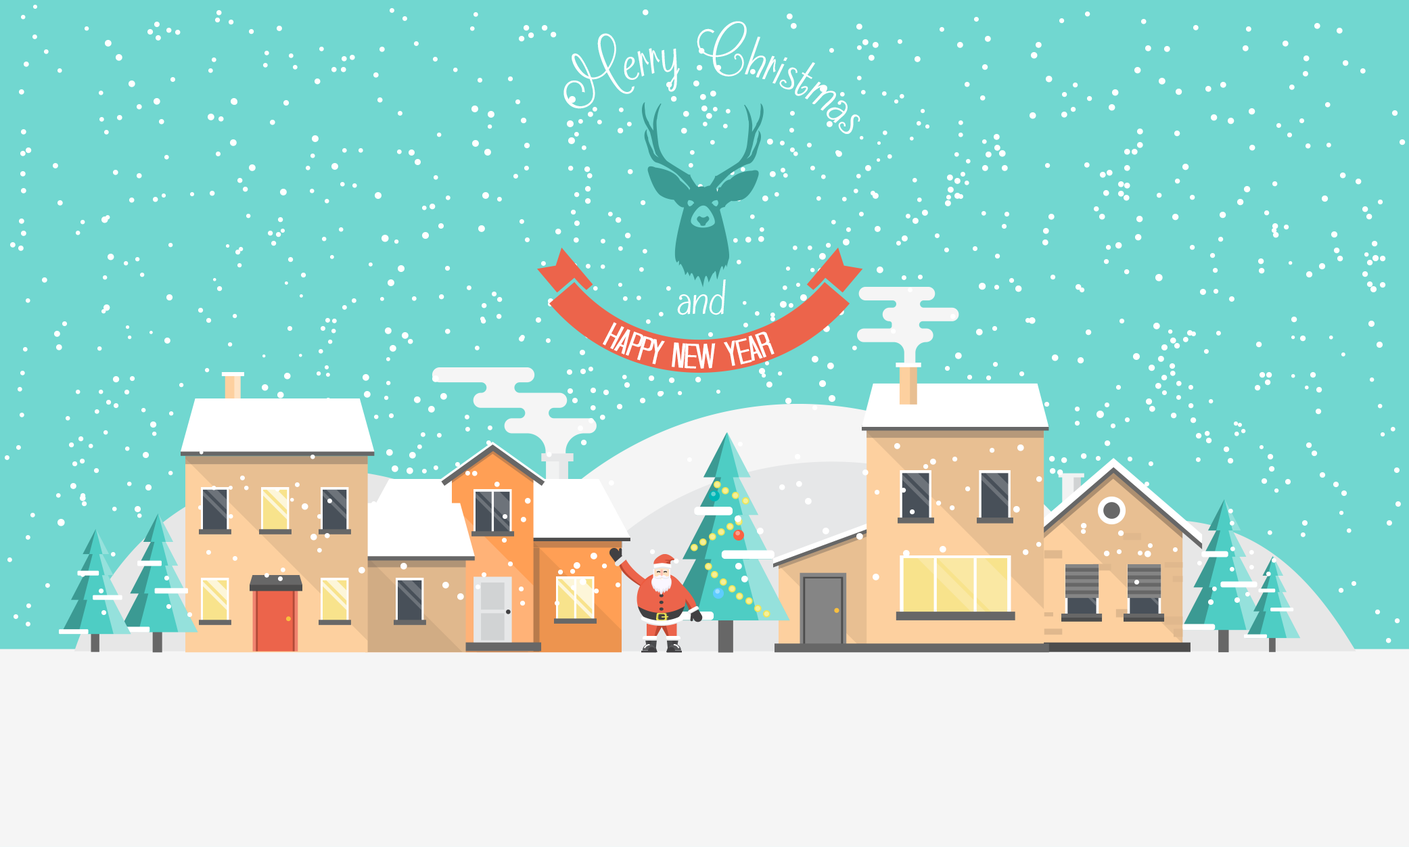
<style>
.page{position:relative;width:1409px;height:847px;background:#71d7d0}
.page>*{position:absolute;margin:0}
.t1{font:59.2px "FrostingforBreakfast";color:#ffffff}
.t2{font:51.8px "FrostingforBreakfast";color:#ffffff}
.t3{font:35px "TallDarkAndHandsome-Condensed";color:#ffffff;scale:1.39 1}
</style>
<div class="page">
<p class="t1" style="left:563px;top:21px;width:297px;height:113px">Merry Christmas</p>
<p class="t2" style="left:677px;top:279px;width:49px;height:36px">and</p>
<p class="t3" style="left:602px;top:322px;width:172px;height:47px">Happy New Year</p>
</div>
